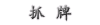
<style>
.page{position:relative;width:100px;height:25px;background:#ffffff}
.page>*{position:absolute;margin:0}
.t1{font:16px "STKaiti";letter-spacing:0.2em;color:#4d4d4d;font-weight:bold}
</style>
<div class="page">
<p class="t1" style="left:29px;top:5px;width:43px;height:16px">抓 牌</p>
</div>
